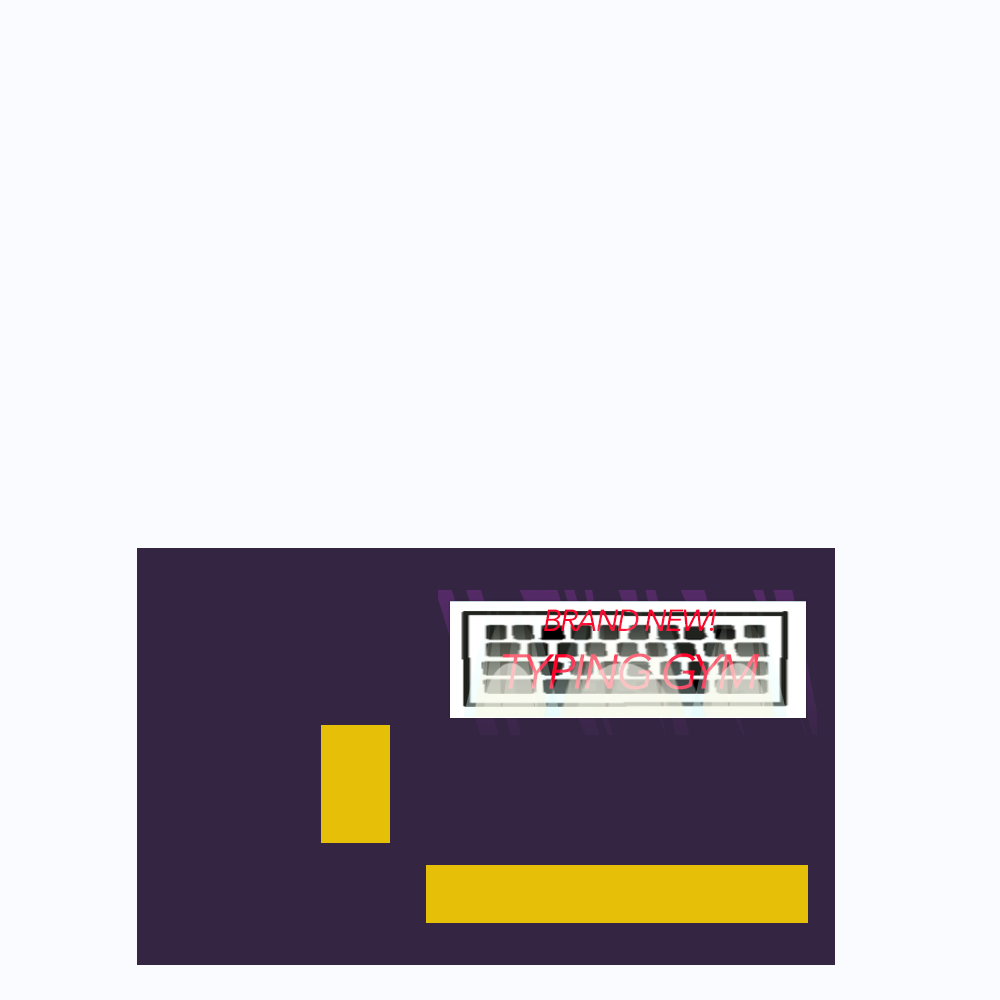
<style>
.page{position:relative;width:1000px;height:1000px;background:#fafbff}
.page>*{position:absolute;margin:0}
.t1{font:30px "AvenirNext-Italic";letter-spacing:-0.05em}
.t2{font:48px "AvenirNext-Italic";letter-spacing:-0.05em}
</style>
<div class="page">
<p class="t1" style="left:502px;top:609px;width:257px;height:81px;text-align:center">BRAND NEW!<br><span class="t2">TYPING GYM</span></p>
</div>
